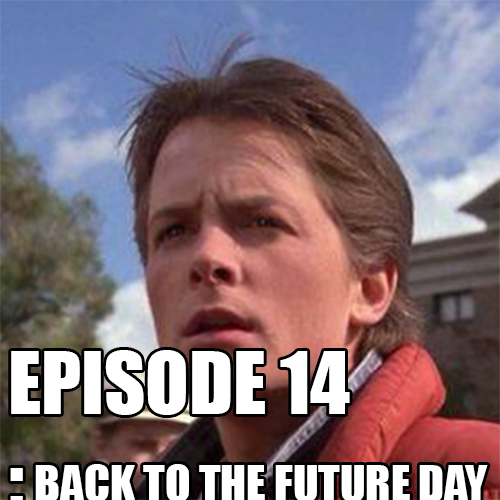
<style>
.page{position:relative;width:500px;height:500px}
.page>*{position:absolute;margin:0}
.t1{font:46.5px "Impact";color:#ffffff}
</style>
<div class="page">
<p class="t1" style="left:35px;top:464px;width:453px;height:38px">BACK TO THE FUTURE DAY</p>
</div>
